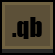
<style>
.page{position:relative;width:55px;height:55px;background:#5c5038}
.page>*{position:absolute;margin:0}
.t1{font:25px "Impact";color:#000000}
</style>
<div class="page">
<p class="t1" style="left:12px;top:17px;width:30px;height:22px">.qb</p>
</div>
